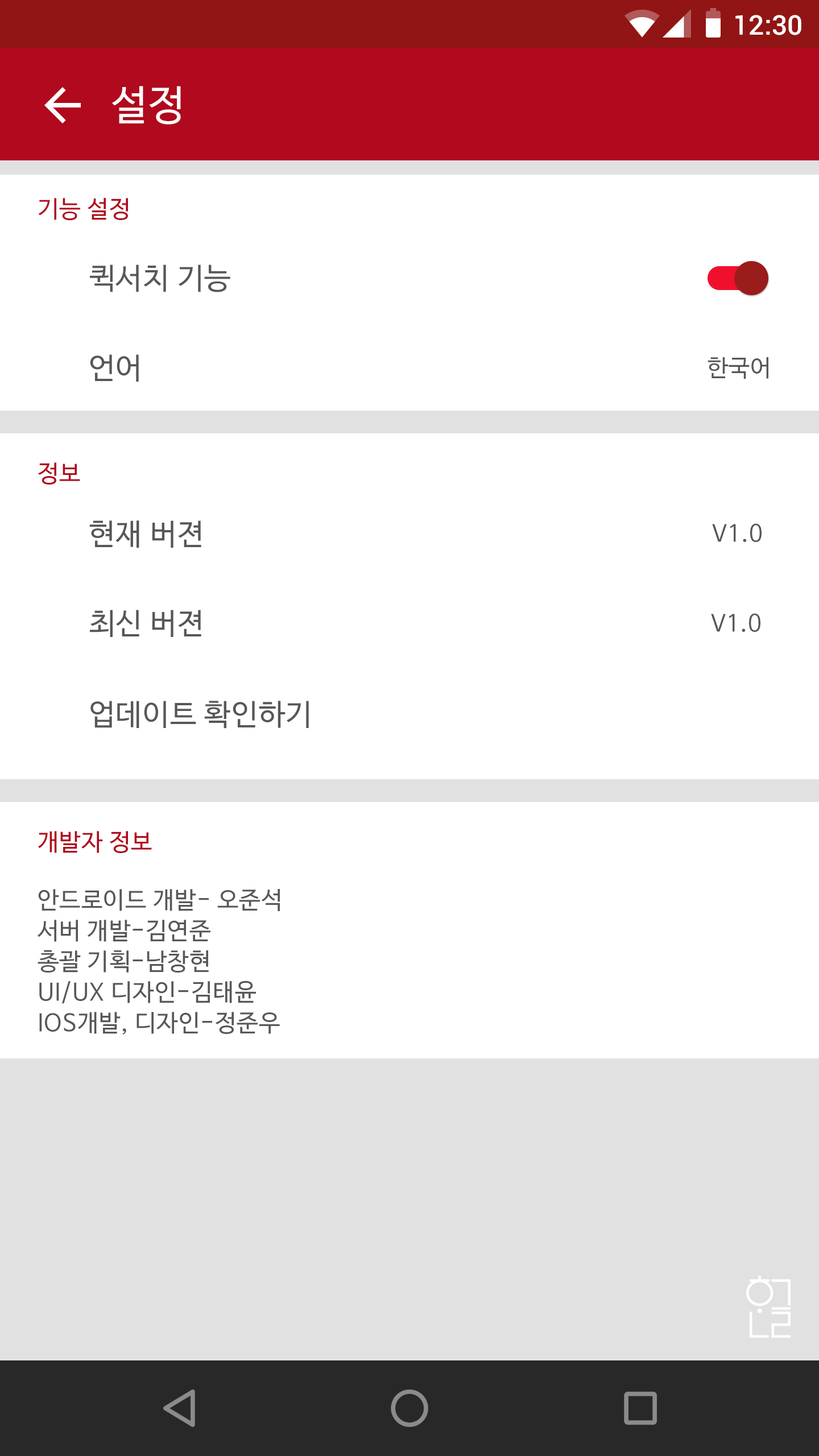
<style>
.page{position:relative;width:819px;height:1456px;background:#ffffff}
.page>*{position:absolute;margin:0}
.t1{font:27.3px "Roboto-Medium";color:#ffffff}
.t2{font:40.9px "NanumBarunGothic";letter-spacing:0.025em;color:#ffffff}
.t3{font:23.9px "NanumBarunGothic";letter-spacing:0.025em;color:#b1091d}
.t4{font:29.6px "NanumBarunGothic";letter-spacing:0.025em;color:#575757}
.t5{font:23.3px "NanumBarunGothic";letter-spacing:0.025em;color:#575757}
.t6{font:23.9px/30.7px "NanumBarunGothic";letter-spacing:0.025em;color:#575757}
</style>
<div class="page">
<p class="t1" style="left:735px;top:15px;width:66px;height:20px">12:30</p>
<p class="t2" style="left:112px;top:86px;width:69px;height:39px">설정</p>
<p class="t3" style="left:38px;top:198px;width:90px;height:23px">기능 설정</p>
<p class="t4" style="left:90px;top:264px;width:140px;height:28px">퀵서치 기능</p>
<p class="t4" style="left:90px;top:354px;width:49px;height:28px">언어</p>
<p class="t5" style="left:708px;top:357px;width:60px;height:22px">한국어</p>
<p class="t3" style="left:38px;top:462px;width:42px;height:23px">정보</p>
<p class="t4" style="left:89px;top:520px;width:112px;height:28px">현재 버젼</p>
<p class="t5" style="left:712px;top:523px;width:50px;height:19px">V1.0</p>
<p class="t4" style="left:90px;top:610px;width:111px;height:27px">최신 버젼</p>
<p class="t5" style="left:711px;top:613px;width:49px;height:19px">V1.0</p>
<p class="t4" style="left:90px;top:701px;width:219px;height:28px">업데이트 확인하기</p>
<p class="t3" style="left:38px;top:831px;width:114px;height:22px">개발자 정보</p>
<p class="t6" style="left:38px;top:889px;width:242px;height:146px">안드로이드 개발- 오준석<br>서버 개발-김연준<br>총괄 기획-남창현<br>UI/UX 디자인-김태윤<br>IOS개발, 디자인-정준우</p>
</div>
